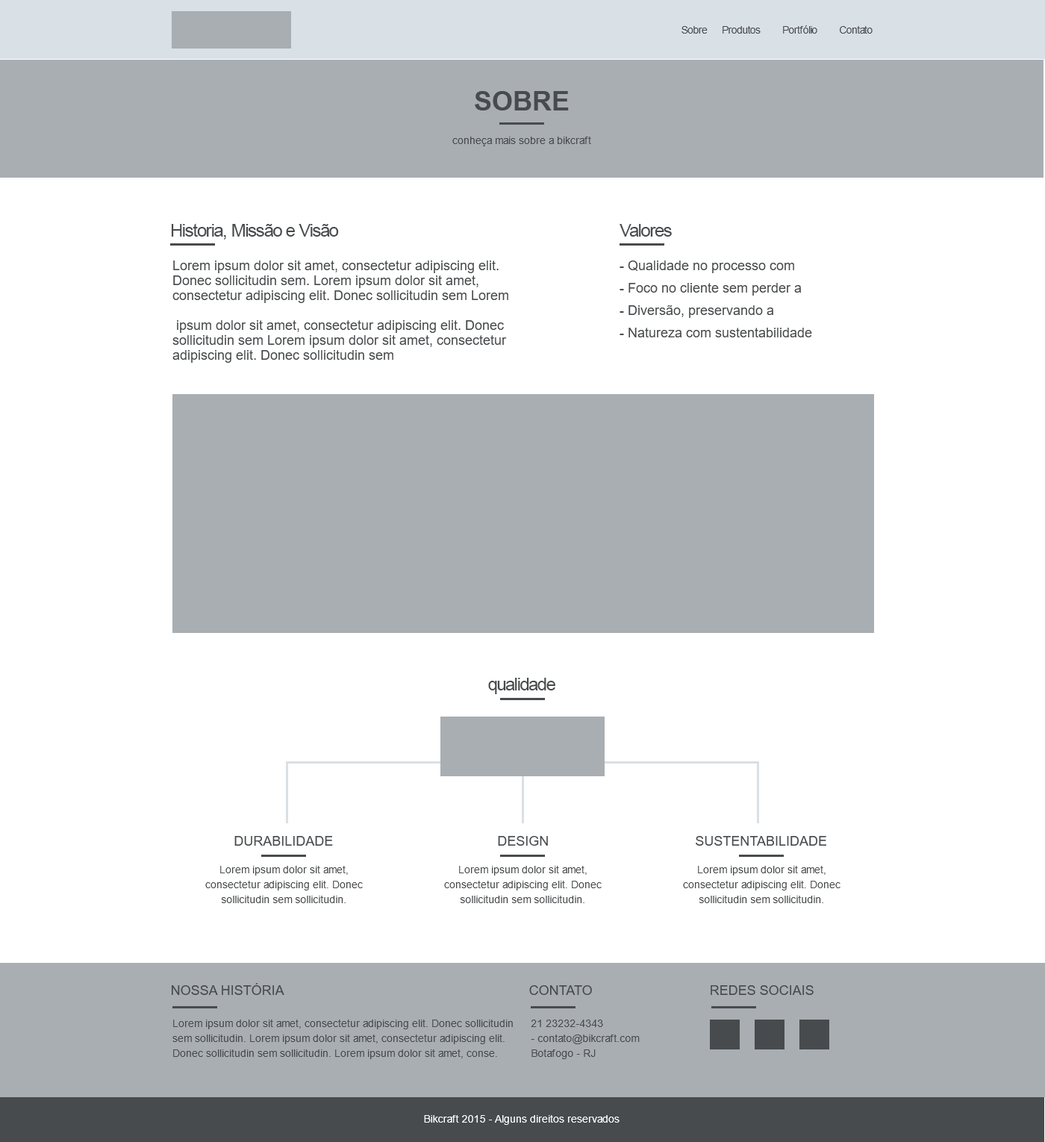
<style>
.page{position:relative;width:1045px;height:1142px;background:#ffffff}
.page>*{position:absolute;margin:0}
.t1{font:10.4px "ArialMT";letter-spacing:-0.05em;color:#484b4d}
.t2{font:26.9px "Arial-BoldMT";color:#484b4d;text-transform:uppercase}
.t3{font:10.4px "ArialMT";color:#484b4d}
.t4{font:17.6px "ArialMT";letter-spacing:-0.05em;color:#484b4d}
.t5{font:13.4px/14.9px "ArialMT";color:#484b4d}
.t6{font:13.4px/22.4px "ArialMT";color:#484b4d}
.t7{font:13.4px "ArialMT";color:#484b4d;text-transform:uppercase}
.t8{font:10.4px/14.9px "ArialMT";color:#484b4d}
.t9{font:10.4px "ArialMT";color:#feffff}
</style>
<div class="page">
<p class="t1" style="left:681px;top:25px;width:191px;height:9px">Sobre      Produtos         Portfólio         Contato</p>
<p class="t2" style="left:475px;top:91px;width:94px;height:19px">SOBRE</p>
<p class="t3" style="left:452px;top:137px;width:139px;height:9px">conheça mais sobre a bikcraft</p>
<p class="t4" style="left:171px;top:223px;width:168px;height:17px">Historia, Missão e Visão</p>
<p class="t4" style="left:619px;top:224px;width:53px;height:13px">Valores</p>
<p class="t5" style="left:172px;top:260px;width:336px;height:103px">Lorem ipsum dolor sit amet, consectetur adipiscing elit. Donec sollicitudin sem. Lorem ipsum dolor sit amet, consectetur adipiscing elit. Donec sollicitudin sem Lorem<br><br> ipsum dolor sit amet, consectetur adipiscing elit. Donec sollicitudin sem Lorem ipsum dolor sit amet, consectetur adipiscing elit. Donec sollicitudin sem</p>
<p class="t6" style="left:619px;top:260px;width:193px;height:77px">- Qualidade no processo com<br>- Foco no cliente sem perder a<br>- Diversão, preservando a <br>- Natureza com sustentabilidade</p>
<p class="t4" style="left:488px;top:677px;width:67px;height:17px">qualidade</p>
<p class="t7" style="left:234px;top:836px;width:99px;height:9px">DURABILIDADE</p>
<p class="t7" style="left:498px;top:836px;width:50px;height:9px">DESIGN</p>
<p class="t7" style="left:695px;top:836px;width:131px;height:9px">SUSTENTABILIDADE</p>
<p class="t8" style="left:205px;top:865px;width:158px;height:38px;text-align:center">Lorem ipsum dolor sit amet, consectetur adipiscing elit. Donec sollicitudin sem sollicitudin.</p>
<p class="t8" style="left:444px;top:865px;width:157px;height:38px;text-align:center">Lorem ipsum dolor sit amet, consectetur adipiscing elit. Donec sollicitudin sem sollicitudin.</p>
<p class="t8" style="left:683px;top:865px;width:157px;height:38px;text-align:center">Lorem ipsum dolor sit amet, consectetur adipiscing elit. Donec sollicitudin sem sollicitudin.</p>
<p class="t7" style="left:172px;top:983px;width:112px;height:12px">NOSSA HISTÓRIA</p>
<p class="t7" style="left:529px;top:985px;width:63px;height:10px">CONTATO</p>
<p class="t7" style="left:710px;top:985px;width:103px;height:10px">REDES SOCIAIS</p>
<p class="t8" style="left:172px;top:1019px;width:341px;height:40px">Lorem ipsum dolor sit amet, consectetur adipiscing elit. Donec sollicitudin sem sollicitudin. Lorem ipsum dolor sit amet, consectetur adipiscing elit. Donec sollicitudin sem sollicitudin. Lorem ipsum dolor sit amet, conse.</p>
<p class="t8" style="left:530px;top:1019px;width:109px;height:40px">21 23232-4343<br>- contato@bikcraft.com<br>Botafogo - RJ</p>
<p class="t9" style="left:424px;top:1115px;width:195px;height:9px">Bikcraft 2015 - Alguns direitos reservados</p>
</div>
